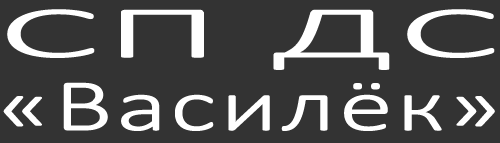
<style>
.page{position:relative;width:500px;height:143px;background:#333333}
.page>*{position:absolute;margin:0}
.t1{font:74px/73px "Calibri-Light";color:#ffffff;font-weight:bold;scale:1.48 1}
.t2{font:74px/73px "Calibri-Light";color:#ffffff;font-weight:bold;scale:2.56 1}
</style>
<div class="page">
<p class="t1" style="left:3px;top:9px;width:492px;height:122px;text-align:center"><span class="t2">СП ДС<br></span>«Василёк»</p>
</div>
